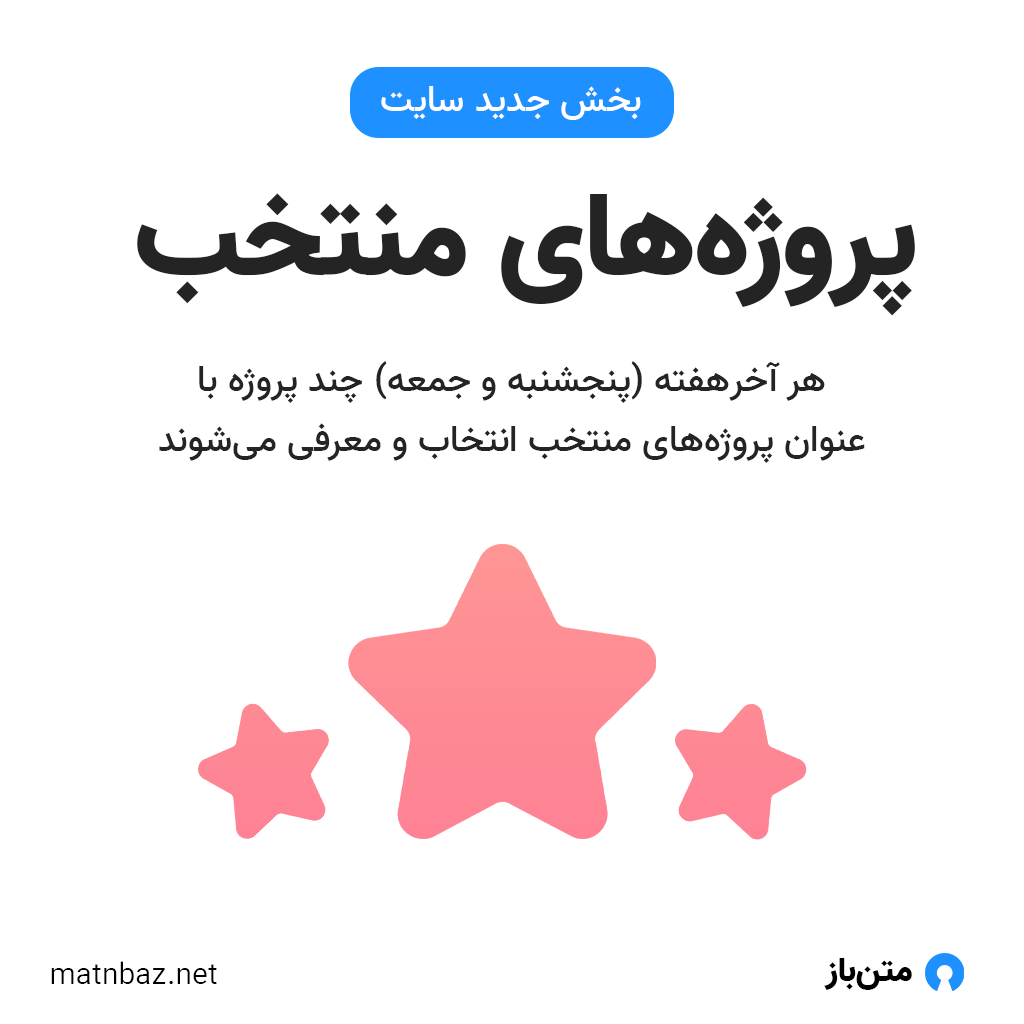
<style>
.page{position:relative;width:1024px;height:1024px;background:#ffffff}
.page>*{position:absolute;margin:0}
.t1{font:37.4px "Vazir-Medium";color:#ffffff}
.t2{font:118.9px "Vazir-Black";color:#242424}
.t3{font:37.4px/59.9px "Vazir-Medium";color:#242424}
.t4{font:30px "Vazir-Light";color:#000000}
.t5{font:34.2px "Vazir-Black";color:#000000}
</style>
<div class="page">
<p class="t1" style="left:381px;top:86px;width:260px;height:34px">بخش جدید سایت</p>
<p class="t2" style="left:137px;top:193px;width:778px;height:123px">پروژه‌های منتخب</p>
<p class="t3" style="left:159px;top:361px;width:706px;height:102px;text-align:center">هر آخر‌هفته (پنجشنبه و جمعه) چند پروژه با عنوان پروژه‌های منتخب انتخاب و معرفی می‌شوند</p>
<p class="t4" style="left:51px;top:961px;width:166px;height:23px">matnbaz.net</p>
<p class="t5" style="left:824px;top:958px;width:88px;height:32px">متن‌باز</p>
</div>
